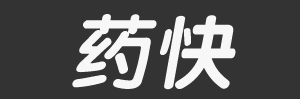
<style>
.page{position:relative;width:300px;height:99px;background:#333333}
.page>*{position:absolute;margin:0}
.t1{font:81px "FZY4JW--GB1-0";letter-spacing:0.025em;color:#ffffff;font-style:italic}
</style>
<div class="page">
<p class="t1" style="left:72px;top:14px;width:164px;height:76px;opacity:0.96">药快</p>
</div>
